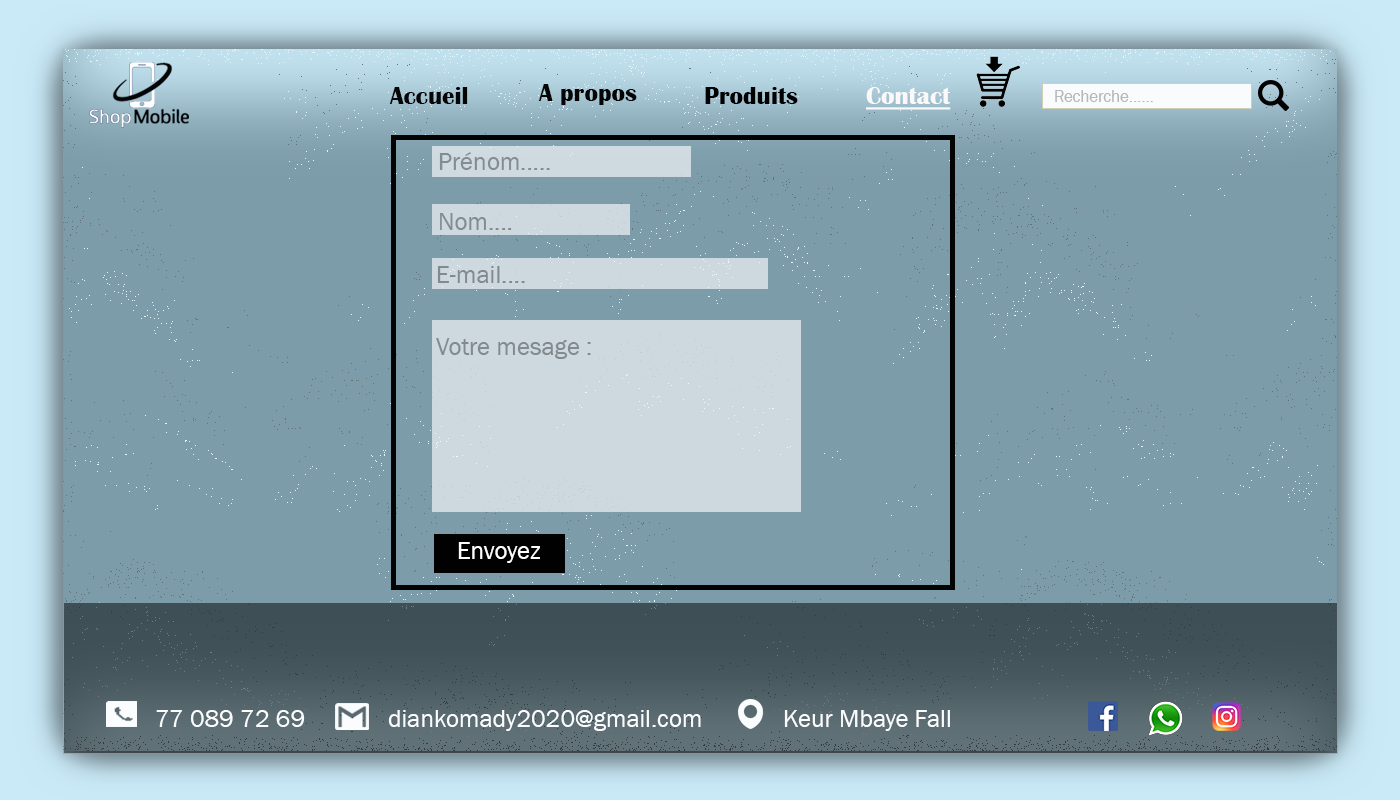
<style>
.page{position:relative;width:1400px;height:800px;background:#7c9caa}
.page>*{position:absolute;margin:0}
.t1{font:25px "BritannicBold";color:#050505}
.t2{font:25px "BritannicBold";color:#040404}
.t3{font:25px "BritannicBold";color:#000000}
.t4{font:25px "BritannicBold";color:#faf8f8;text-decoration:underline}
.t5{font:16.7px "FranklinGothic-Book";color:#b7b8b9}
.t6{font:25px "FranklinGothic-Book";color:#848c90}
.t7{font:25px "FranklinGothic-Book";color:#838b8f}
.t8{font:25px "FranklinGothic-Book";color:#828a8e}
.t9{font:25px "FranklinGothic-Book";color:#fefefe}
.t10{font:25px "FranklinGothic-Book";color:#fbfcfd}
</style>
<div class="page">
<p class="t1" style="left:389px;top:86px;width:79px;height:18px">Accueil</p>
<p class="t2" style="left:538px;top:84px;width:99px;height:21px">A propos</p>
<p class="t3" style="left:705px;top:86px;width:93px;height:18px">Produits</p>
<p class="t4" style="left:866px;top:87px;width:85px;height:23px">Contact</p>
<p class="t5" style="left:1055px;top:90px;width:98px;height:12px">Recherche......</p>
<p class="t6" style="left:439px;top:152px;width:111px;height:18px">Prénom.....</p>
<p class="t7" style="left:440px;top:213px;width:72px;height:17px">Nom....</p>
<p class="t8" style="left:437px;top:266px;width:88px;height:17px">E-mail....</p>
<p class="t8" style="left:436px;top:338px;width:155px;height:21px">Votre mesage :</p>
<p class="t9" style="left:458px;top:542px;width:82px;height:21px">Envoyez</p>
<p class="t10" style="left:156px;top:710px;width:149px;height:17px">77 089 72 69</p>
<p class="t10" style="left:388px;top:710px;width:313px;height:21px">diankomady2020@gmail.com</p>
<p class="t10" style="left:784px;top:710px;width:166px;height:21px">Keur Mbaye Fall</p>
</div>
